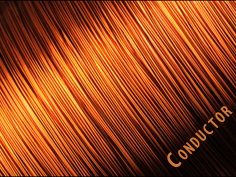
<style>
.page{position:relative;width:236px;height:177px}
.page>*{position:absolute;margin:0}
.t1{font:20px "AdobeFanHeitiStd-Bold";letter-spacing:0.1em;color:#d67835;font-variant:small-caps;font-weight:bold}
</style>
<div class="page">
<p class="t1" style="left:167px;top:106px;width:66px;height:61px;rotate:-45deg">Conductor</p>
</div>
